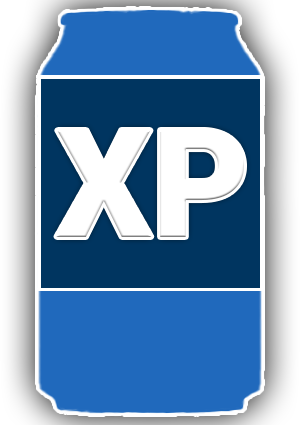
<style>
.page{position:relative;width:300px;height:425px;background:#2069bc}
.page>*{position:absolute;margin:0}
.t1{font:150px "Roboto-Black";color:#ffffff}
</style>
<div class="page">
<p class="t1" style="left:56px;top:130px;width:188px;height:107px">XP</p>
</div>
